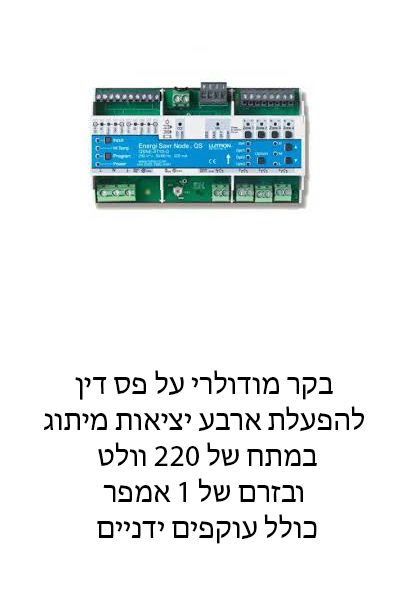
<style>
.page{position:relative;width:400px;height:600px;background:#ffffff}
.page>*{position:absolute;margin:0}
.t1{font:30px "MyriadHebrew-Regular";color:#000000}
</style>
<div class="page">
<p class="t1" style="left:44px;top:370px;width:320px;height:174px;text-align:center">בקר מודולרי על פס דין<br>להפעלת ארבע יציאות מיתוג<br> במתח של 220 וולט<br>ובזרם של 1 אמפר<br> כולל עוקפים ידניים</p>
</div>
